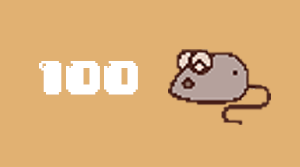
<style>
.page{position:relative;width:300px;height:167px;background:#e1b172}
.page>*{position:absolute;margin:0}
.t1{font:40.6px "04b30";color:#ffffff;font-weight:bold}
</style>
<div class="page">
<p class="t1" style="left:39px;top:61px;width:99px;height:34px">100</p>
</div>
